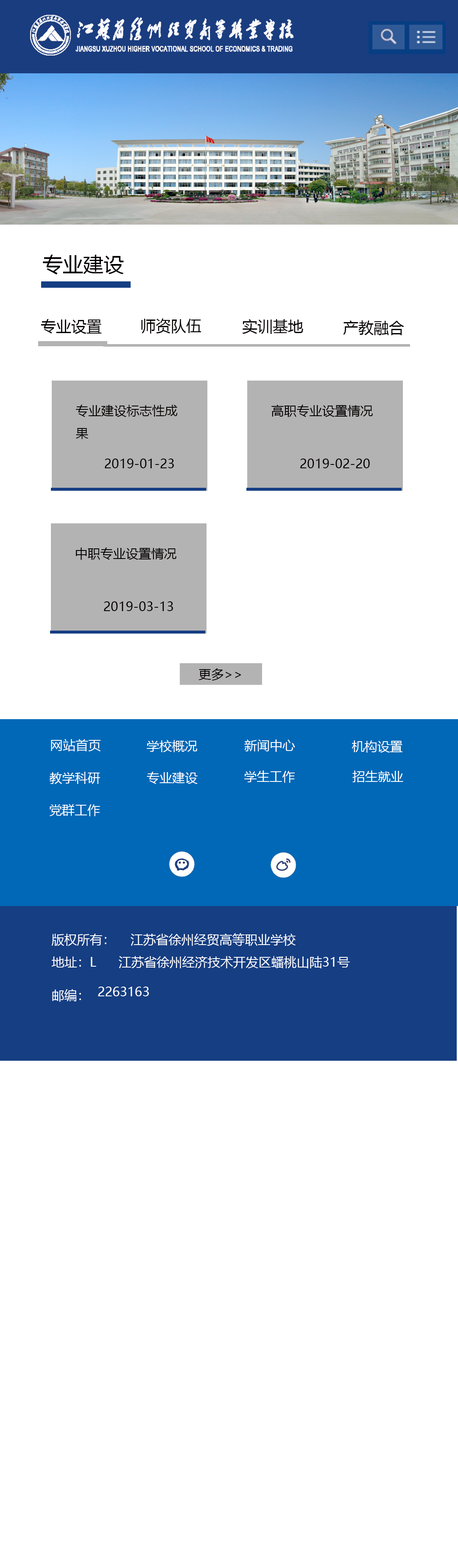
<style>
.page{position:relative;width:458px;height:1568px;background:#ffffff}
.page>*{position:absolute;margin:0}
.t1{font:20.3px "MicrosoftYaHei";color:#040000}
.t2{font:15.3px "MicrosoftYaHei";color:#040000}
.t3{font:12.7px "MicrosoftYaHei";color:#040000}
.t4{font:12.7px "MicrosoftYaHei";color:#ffffff}
</style>
<div class="page">
<p class="t1" style="left:43px;top:255px;width:81px;height:20px">专业建设</p>
<p class="t2" style="left:41px;top:319px;width:61px;height:15px">专业设置</p>
<p class="t2" style="left:141px;top:318px;width:60px;height:16px">师资队伍</p>
<p class="t2" style="left:242px;top:319px;width:61px;height:15px">实训基地</p>
<p class="t2" style="left:343px;top:320px;width:61px;height:15px">产教融合</p>
<p class="t3" style="left:75px;top:405px;width:103px;height:34px">专业建设标志性成<br>果</p>
<p class="t3" style="left:271px;top:405px;width:102px;height:12px">高职专业设置情况</p>
<p class="t3" style="left:105px;top:459px;width:69px;height:9px">2019-01-23</p>
<p class="t3" style="left:300px;top:459px;width:70px;height:9px">2019-02-20</p>
<p class="t3" style="left:76px;top:548px;width:100px;height:12px">中职专业设置情况</p>
<p class="t3" style="left:104px;top:601px;width:69px;height:10px">2019-03-13</p>
<p class="t3" style="left:198px;top:668px;width:43px;height:13px">更多&gt;&gt;</p>
<p class="t4" style="left:51px;top:739px;width:50px;height:12px">网站首页</p>
<p class="t4" style="left:147px;top:740px;width:50px;height:12px">学校概况</p>
<p class="t4" style="left:244px;top:740px;width:51px;height:12px">新闻中心</p>
<p class="t4" style="left:352px;top:740px;width:50px;height:13px">机构设置</p>
<p class="t4" style="left:49px;top:772px;width:51px;height:12px">教学科研</p>
<p class="t4" style="left:147px;top:772px;width:50px;height:12px">专业建设</p>
<p class="t4" style="left:244px;top:770px;width:51px;height:13px">学生工作</p>
<p class="t4" style="left:352px;top:770px;width:51px;height:12px">招生就业</p>
<p class="t4" style="left:50px;top:804px;width:50px;height:12px">党群工作</p>
<p class="t4" style="left:51px;top:934px;width:55px;height:12px">版权所有：</p>
<p class="t4" style="left:131px;top:933px;width:164px;height:13px">江苏省徐州经贸高等职业学校</p>
<p class="t4" style="left:51px;top:956px;width:45px;height:11px">地址：L<br>：</p>
<p class="t4" style="left:119px;top:956px;width:231px;height:12px">江苏省徐州经济技术开发区蟠桃山陆31号</p>
<p class="t4" style="left:52px;top:989px;width:29px;height:13px">邮编：</p>
<p class="t4" style="left:98px;top:987px;width:51px;height:9px">2263163</p>
</div>
